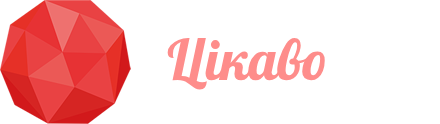
<style>
.page{position:relative;width:440px;height:124px;background:#ffffff}
.page>*{position:absolute;margin:0}
.t1{font:56px "Lobster-Regular";color:#fe8d8b}
</style>
<div class="page">
<p class="t1" style="left:167px;top:37px;width:158px;height:53px">Цікаво</p>
</div>
